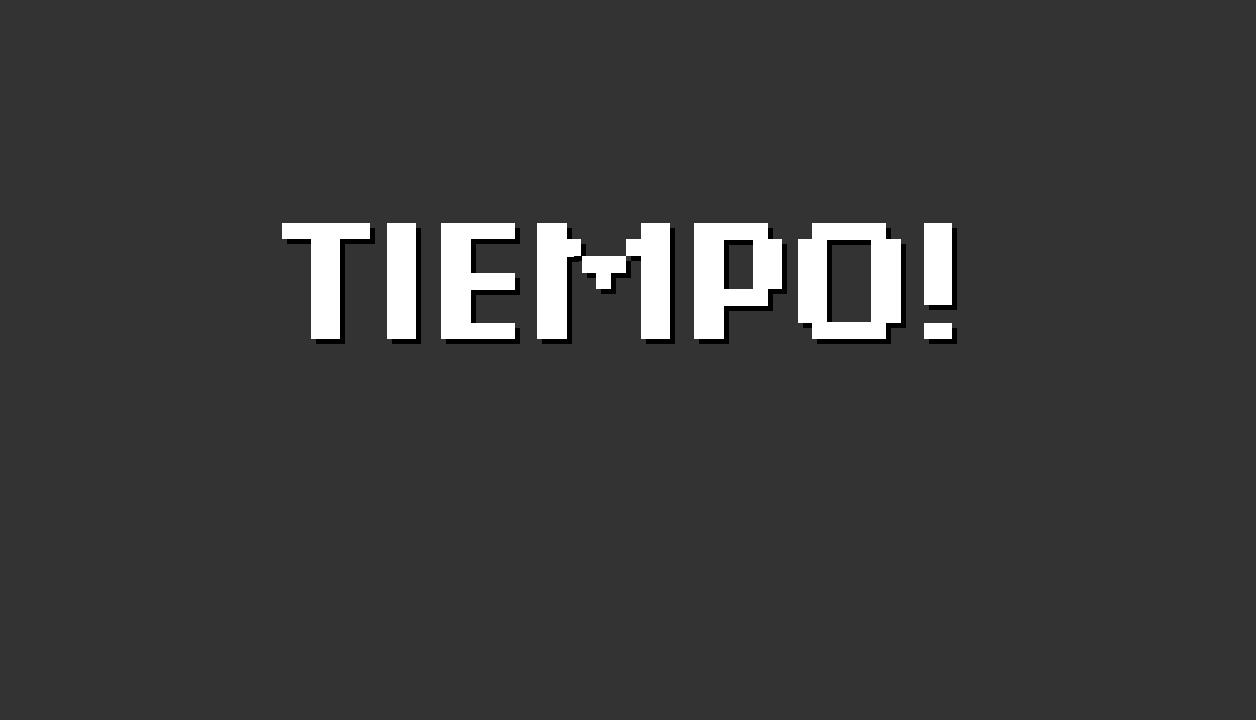
<style>
.page{position:relative;width:1256px;height:720px;background:#333333}
.page>*{position:absolute;margin:0}
.t1{font:150.4px "BerkeliumBitmap";color:#ffffff;scale:0.88 1}
</style>
<div class="page">
<p class="t1" style="left:282px;top:223px;width:670px;height:116px">TIEMPO!</p>
</div>
